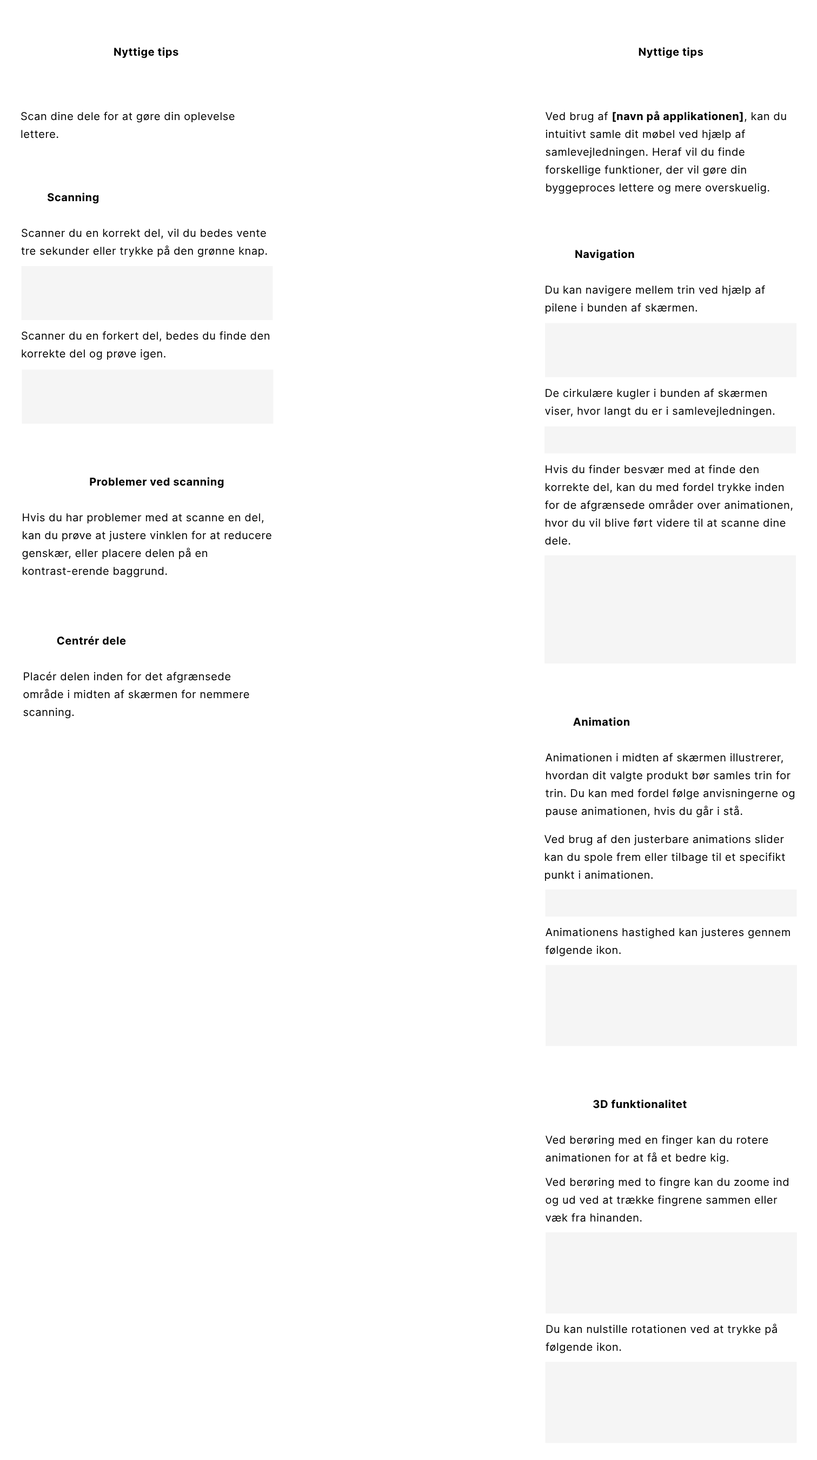
<style>
.page{position:relative;width:817px;height:1460px;background:#ffffff}
.page>*{position:absolute;margin:0}
.t1{font:10.8px "Inter-Bold";letter-spacing:0.03em;color:#000000}
.t2{font:10.8px/17.8px "Inter-Regular";letter-spacing:0.03em;color:#000000}
.t3{font:10.8px/17.8px "Inter-Bold";letter-spacing:0.03em;color:#000000}
</style>
<div class="page">
<p class="t1" style="left:114px;top:47px;width:64px;height:11px">Nyttige tips</p>
<p class="t1" style="left:638px;top:47px;width:65px;height:11px">Nyttige tips</p>
<p class="t2" style="left:21px;top:111px;width:214px;height:27px;text-align:center">Scan dine dele for at gøre din oplevelse lettere.</p>
<p class="t2" style="left:545px;top:111px;width:241px;height:83px;text-align:center">Ved brug af <span class="t3">[navn på applikationen]</span>, kan du intuitivt samle dit møbel ved hjælp af samlevejledningen. Heraf vil du finde forskellige funktioner, der vil gøre din byggeproces lettere og mere overskuelig.</p>
<p class="t1" style="left:48px;top:192px;width:51px;height:12px">Scanning</p>
<p class="t2" style="left:21px;top:229px;width:246px;height:28px;text-align:center">Scanner du en korrekt del, vil du bedes vente tre sekunder eller trykke på den grønne knap.</p>
<p class="t1" style="left:575px;top:249px;width:59px;height:12px">Navigation</p>
<p class="t2" style="left:545px;top:285px;width:220px;height:29px;text-align:center">Du kan navigere mellem trin ved hjælp af pilene i bunden af skærmen.</p>
<p class="t2" style="left:22px;top:331px;width:248px;height:29px;text-align:center">Scanner du en forkert del, bedes du finde den korrekte del og prøve igen.</p>
<p class="t2" style="left:545px;top:388px;width:230px;height:29px;text-align:center">De cirkulære kugler i bunden af skærmen viser, hvor langt du er i samlevejledningen.</p>
<p class="t2" style="left:545px;top:464px;width:248px;height:81px;text-align:center">Hvis du finder besvær med at finde den korrekte del, kan du med fordel trykke inden for de afgrænsede områder over animationen, hvor du vil blive ført videre til at scanne dine dele.</p>
<p class="t1" style="left:90px;top:477px;width:134px;height:11px">Problemer ved scanning</p>
<p class="t2" style="left:22px;top:513px;width:249px;height:64px;text-align:center">Hvis du har problemer med at scanne en del, kan du prøve at justere vinklen for at reducere genskær, eller placere delen på en kontrast-erende baggrund.</p>
<p class="t1" style="left:57px;top:636px;width:69px;height:9px">Centrér dele</p>
<p class="t2" style="left:23px;top:671px;width:226px;height:48px;text-align:center">Placér delen inden for det afgrænsede område i midten af skærmen for nemmere scanning.</p>
<p class="t1" style="left:573px;top:717px;width:56px;height:9px">Animation</p>
<p class="t2" style="left:545px;top:753px;width:250px;height:64px;text-align:center">Animationen i midten af skærmen illustrerer, hvordan dit valgte produkt bør samles trin for trin. Du kan med fordel følge anvisningerne og pause animationen, hvis du går i stå.</p>
<p class="t2" style="left:544px;top:834px;width:241px;height:47px;text-align:center">Ved brug af den justerbare animations slider kan du spole frem eller tilbage til et specifikt punkt i animationen.</p>
<p class="t2" style="left:545px;top:928px;width:245px;height:28px;text-align:center">Animationens hastighed kan justeres gennem følgende ikon.</p>
<p class="t1" style="left:593px;top:1099px;width:94px;height:9px">3D funktionalitet</p>
<p class="t2" style="left:545px;top:1135px;width:223px;height:29px;text-align:center">Ved berøring med en finger kan du rotere animationen for at få et bedre kig.</p>
<p class="t2" style="left:545px;top:1177px;width:243px;height:45px;text-align:center">Ved berøring med to fingre kan du zoome ind og ud ved at trække fingrene sammen eller væk fra hinanden.</p>
<p class="t2" style="left:545px;top:1323px;width:232px;height:30px;text-align:center">Du kan nulstille rotationen ved at trykke på følgende ikon.</p>
</div>
